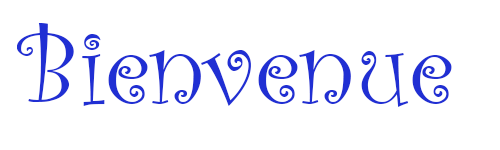
<style>
.page{position:relative;width:500px;height:150px;background:#ffffff}
.page>*{position:absolute;margin:0}
.t1{font:108.7px "CurlzMT";color:#202fd3}
</style>
<div class="page">
<p class="t1" style="left:17px;top:23px;width:435px;height:84px">Bienvenue</p>
</div>
